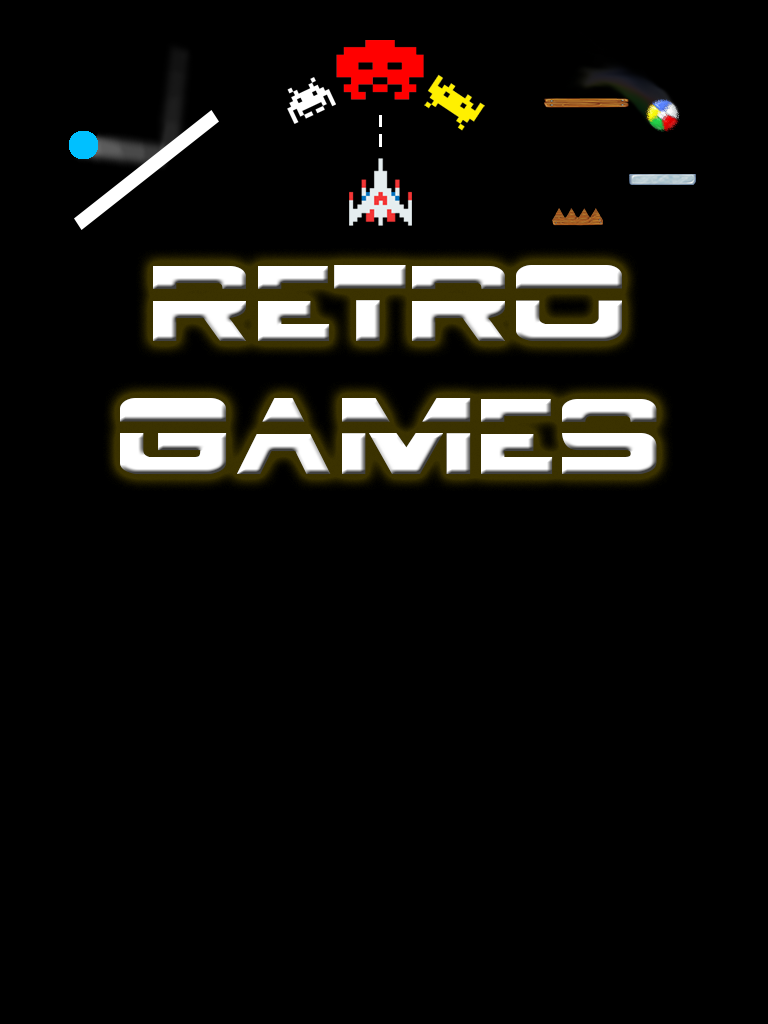
<style>
.page{position:relative;width:768px;height:1024px;background:#000000}
.page>*{position:absolute;margin:0}
.t1{font:110.7px "BorgNine-Regular";color:#ffffff}
</style>
<div class="page">
<p class="t1" style="left:120px;top:265px;width:537px;height:209px;text-align:center">RETRO GAMES</p>
</div>
